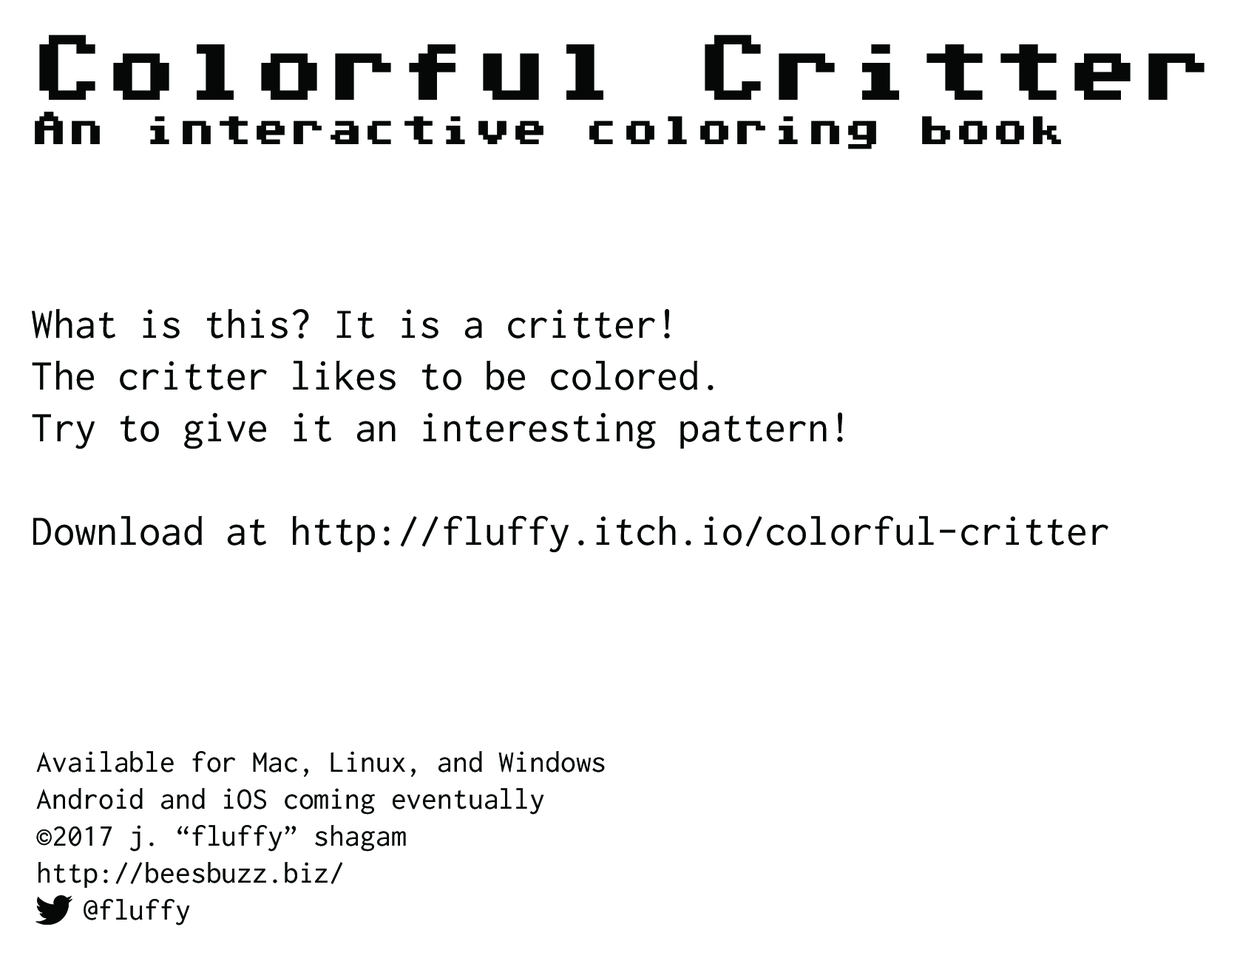
<style>
.page{position:relative;width:1240px;height:961px;background:#ffffff}
.page>*{position:absolute;margin:0}
.t1{font:8.9px "C64ProMono-Style";color:#060808}
.t2{font:74px "C64ProMono-Style";color:#060808}
.t3{font:43.1px "Inconsolata";color:#060808}
.t4{font:30.8px "Inconsolata";color:#060808}
</style>
<div class="page">
<p class="t1" style="left:35px;top:35px;width:1170px;height:114px"><span class="t2">Colorful Critter<br></span>An interactive coloring book</p>
<p class="t3" style="left:32px;top:309px;width:1077px;height:244px">What is this? It is a critter!<br>The critter likes to be colored.<br>Try to give it an interesting pattern!<br><br>Download at http://fluffy.itch.io/colorful-critter</p>
<p class="t4" style="left:36px;top:751px;width:569px;height:175px">Available for Mac, Linux, and Windows<br>Android and iOS coming eventually<br>©2017 j. “fluffy” shagam<br>http://beesbuzz.biz/<br>   @fluffy</p>
</div>
